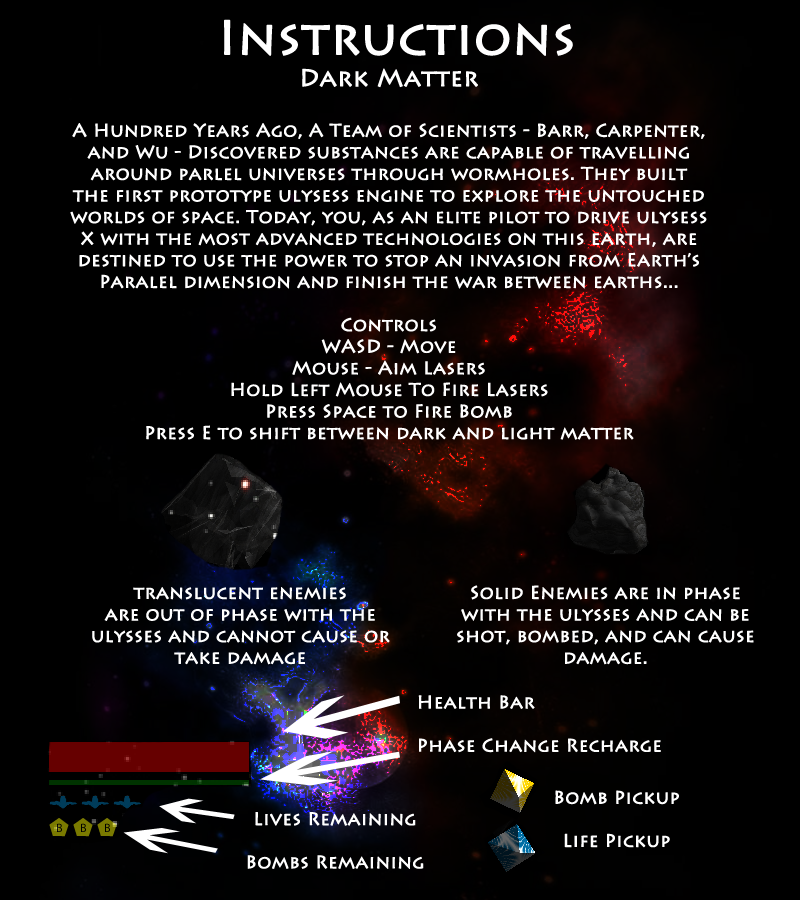
<style>
.page{position:relative;width:800px;height:900px;background:#000000}
.page>*{position:absolute;margin:0}
.t1{font:48px "LithosPro-Regular";color:#ffffff;font-weight:bold}
.t2{font:18px "LithosPro-Regular";color:#ffffff;font-weight:bold}
.t3{font:24px "LithosPro-Regular";color:#ffffff;font-weight:bold}
</style>
<div class="page">
<p class="t1" style="left:224px;top:19px;width:349px;height:37px">Instructions</p>
<p class="t2" style="left:70px;top:68px;width:637px;height:372px;text-align:center"><span class="t3">Dark Matter<br><br></span>A Hundred Years Ago, A Team of Scientists - Barr, Carpenter,<br>and Wu - Discovered substances are capable of travelling<br>around parlel universes through wormholes. They built<br>the first prototype ulysess engine to explore the untouched<br>worlds of space. Today, you, as an elite pilot to drive ulysess<br>X with the most advanced technologies on this earth, are<br>destined to use the power to stop an invasion from Earth’s<br>Paralel dimension and finish the war between earths...<br><br>Controls<br>WASD - Move<br>Mouse - Aim Lasers<br>Hold Left Mouse To Fire Lasers<br>Press Space to Fire Bomb<br>Press E to shift between dark and light matter</p>
<p class="t2" style="left:92px;top:587px;width:298px;height:78px;text-align:center">translucent enemies<br>are out of phase with the ulysses and cannot cause or take damage</p>
<p class="t2" style="left:457px;top:585px;width:297px;height:80px;text-align:center">Solid Enemies are in phase with the ulysses and can be shot, bombed, and can cause damage.</p>
<p class="t2" style="left:418px;top:695px;width:243px;height:58px">Health Bar<br><br>Phase Change Recharge</p>
<p class="t2" style="left:555px;top:790px;width:124px;height:58px;text-align:center">Bomb Pickup<br><br>Life Pickup</p>
<p class="t2" style="left:247px;top:812px;width:177px;height:57px;text-align:center">Lives Remaining<br><br>Bombs Remaining</p>
</div>
